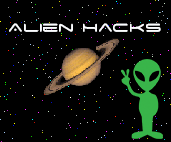
<style>
.page{position:relative;width:171px;height:142px;background:#000000}
.page>*{position:absolute;margin:0}
.t1{font:18px "SpaceAge";color:#fbfdff}
</style>
<div class="page">
<p class="t1" style="left:9px;top:23px;width:152px;height:9px">Alien Hacks</p>
</div>
